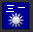
<style>
.page{position:relative;width:33px;height:32px;background:#000090}
.page>*{position:absolute;margin:0}
.t1{font:10.4px "SimSun";color:#ffffff}
</style>
<div class="page">
<p class="t1" style="left:6px;top:5px;width:19px;height:7px">三一</p>
</div>
